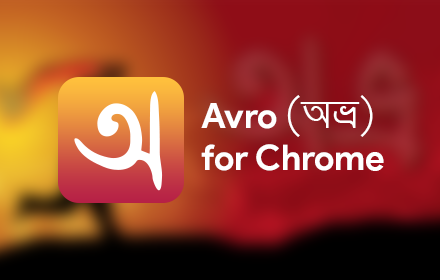
<style>
.page{position:relative;width:440px;height:280px}
.page>*{position:absolute;margin:0}
.t1{font:35.2px "ProductSans-Bold";color:#ffffff}
.t2{font:35.2px "SiyamRupaliANSI";color:#ffffff}
</style>
<div class="page">
<p class="t1" style="left:201px;top:95px;width:183px;height:76px">Avro <span class="t2">(Aå) <br></span>for Chrome</p>
</div>
